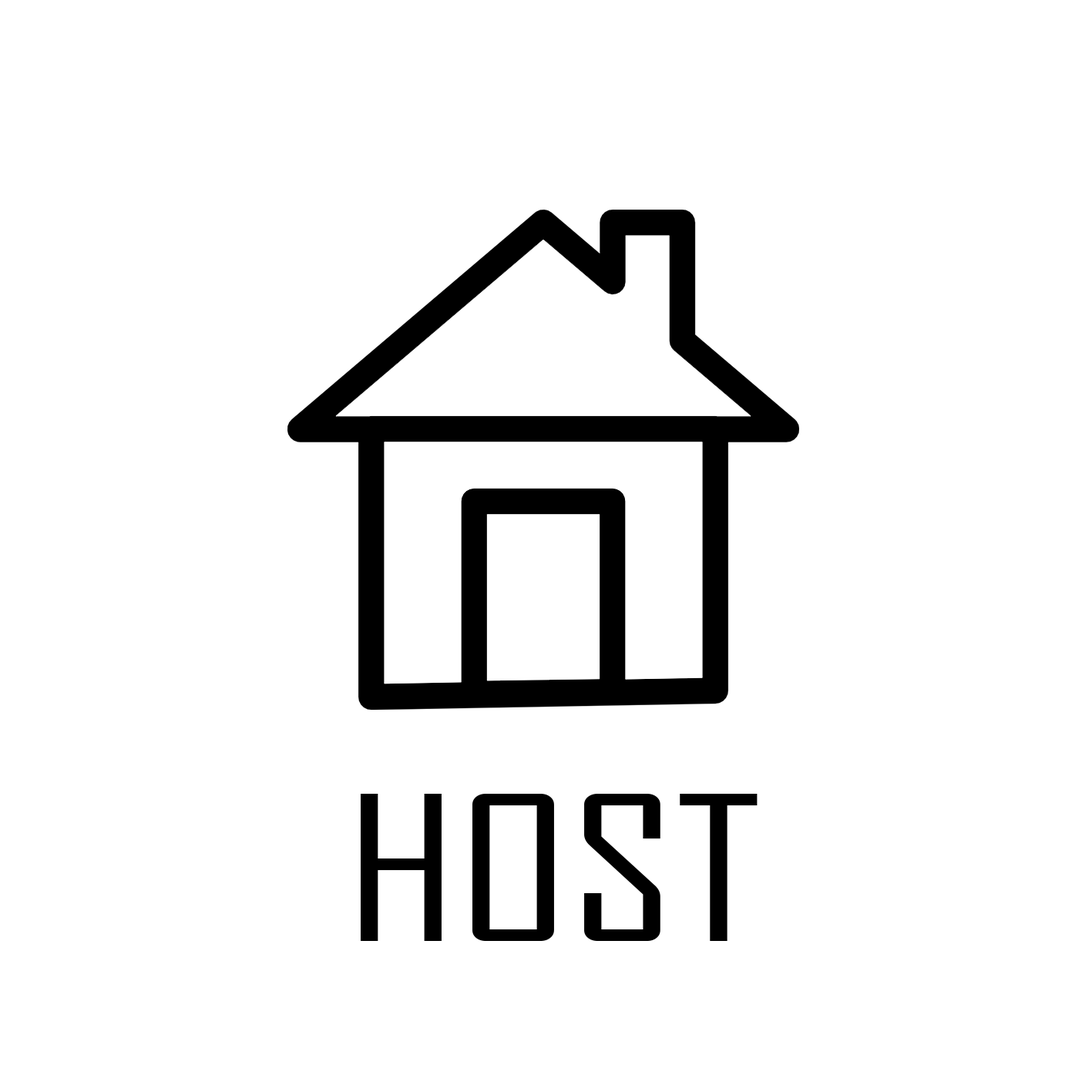
<style>
.page{position:relative;width:1092px;height:1092px;background:#ffffff}
.page>*{position:absolute;margin:0}
.t1{font:192.6px "AgencyFB-Reg";color:#000000;scale:1.31 1}
</style>
<div class="page">
<p class="t1" style="left:361px;top:794px;width:397px;height:147px">HOST</p>
</div>
